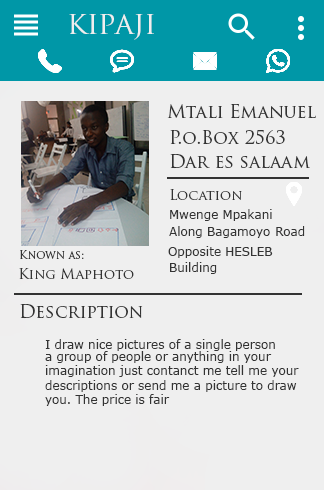
<style>
.page{position:relative;width:324px;height:490px;background:#efefef}
.page>*{position:absolute;margin:0}
.t1{font:30px "TrajanPro-Regular";color:#efefef}
.t2{font:18px "TrajanPro-Regular";color:#333333}
.t3{font:14px "TrajanPro-Regular";color:#333333}
.t4{font:12px "Verdana";color:#333333}
.t5{font:11px "TrajanPro-Regular";color:#333333}
</style>
<div class="page">
<p class="t1" style="left:69px;top:14px;width:85px;height:26px">kipaji</p>
<p class="t2" style="left:167px;top:104px;width:149px;height:14px">Mtali Emanuel</p>
<p class="t2" style="left:170px;top:130px;width:115px;height:14px">P.o.Box 2563</p>
<p class="t2" style="left:170px;top:154px;width:140px;height:15px">Dar es salaam</p>
<p class="t3" style="left:170px;top:189px;width:72px;height:11px">Location</p>
<p class="t4" style="left:170px;top:209px;width:102px;height:12px">Mwenge Mpakani</p>
<p class="t4" style="left:169px;top:226px;width:101px;height:12px">Along Bagamoyo</p>
<p class="t4" style="left:276px;top:226px;width:29px;height:10px">Road</p>
<p class="t4" style="left:168px;top:246px;width:105px;height:12px">Opposite HESLEB</p>
<p class="t5" style="left:20px;top:250px;width:64px;height:9px">:Known as</p>
<p class="t3" style="left:19px;top:268px;width:115px;height:11px">King Maphoto</p>
<p class="t4" style="left:170px;top:262px;width:47px;height:12px">Building</p>
<p class="t2" style="left:20px;top:304px;width:123px;height:15px">Description</p>
<p class="t4" style="left:45px;top:339px;width:230px;height:12px">I draw nice pictures of a single person</p>
<p class="t4" style="left:45px;top:351px;width:254px;height:55px;text-align:right">a group of people or anything in your<br>imagination just contanct me tell me your<br>descriptions or send me a picture to draw<br>you. The price is fair</p>
</div>
